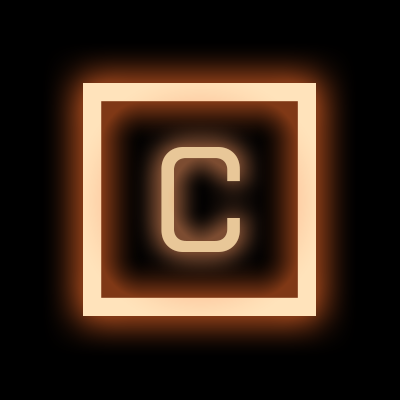
<style>
.page{position:relative;width:400px;height:400px;background:#000000}
.page>*{position:absolute;margin:0}
.t1{font:150px "Purista";color:#e8c798}
</style>
<div class="page">
<p class="t1" style="left:161px;top:147px;width:79px;height:105px">C</p>
</div>
